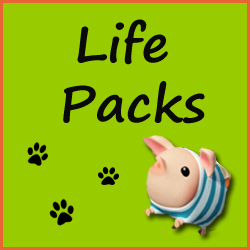
<style>
.page{position:relative;width:250px;height:250px;background:#99cc00}
.page>*{position:absolute;margin:0}
.t1{font:49.8px "SegoePrint-Bold";color:#0a0a0a;scale:1.05 1}
</style>
<div class="page">
<p class="t1" style="left:63px;top:19px;width:142px;height:105px;text-align:center">Life <br>Packs</p>
</div>
